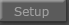
<style>
.page{position:relative;width:69px;height:25px;background:#5b5b5b}
.page>*{position:absolute;margin:0}
.t1{font:12px "Verdana";color:#9e9e9e}
</style>
<div class="page">
<p class="t1" style="left:14px;top:7px;width:35px;height:11px">Setup</p>
</div>
